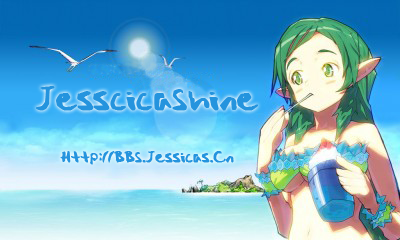
<style>
.page{position:relative;width:400px;height:240px}
.page>*{position:absolute;margin:0}
.t1{font:30px "Stryka";color:#2494de;font-weight:bold;scale:1.23 1}
.t2{font:14px "Stryka";color:#2494de;font-weight:bold;scale:1.23 1}
</style>
<div class="page">
<p class="t1" style="left:36px;top:86px;width:222px;height:25px">JesscicaShine</p>
<p class="t2" style="left:60px;top:151px;width:174px;height:14px">Http://BBS.Jessicas.Cn</p>
</div>
